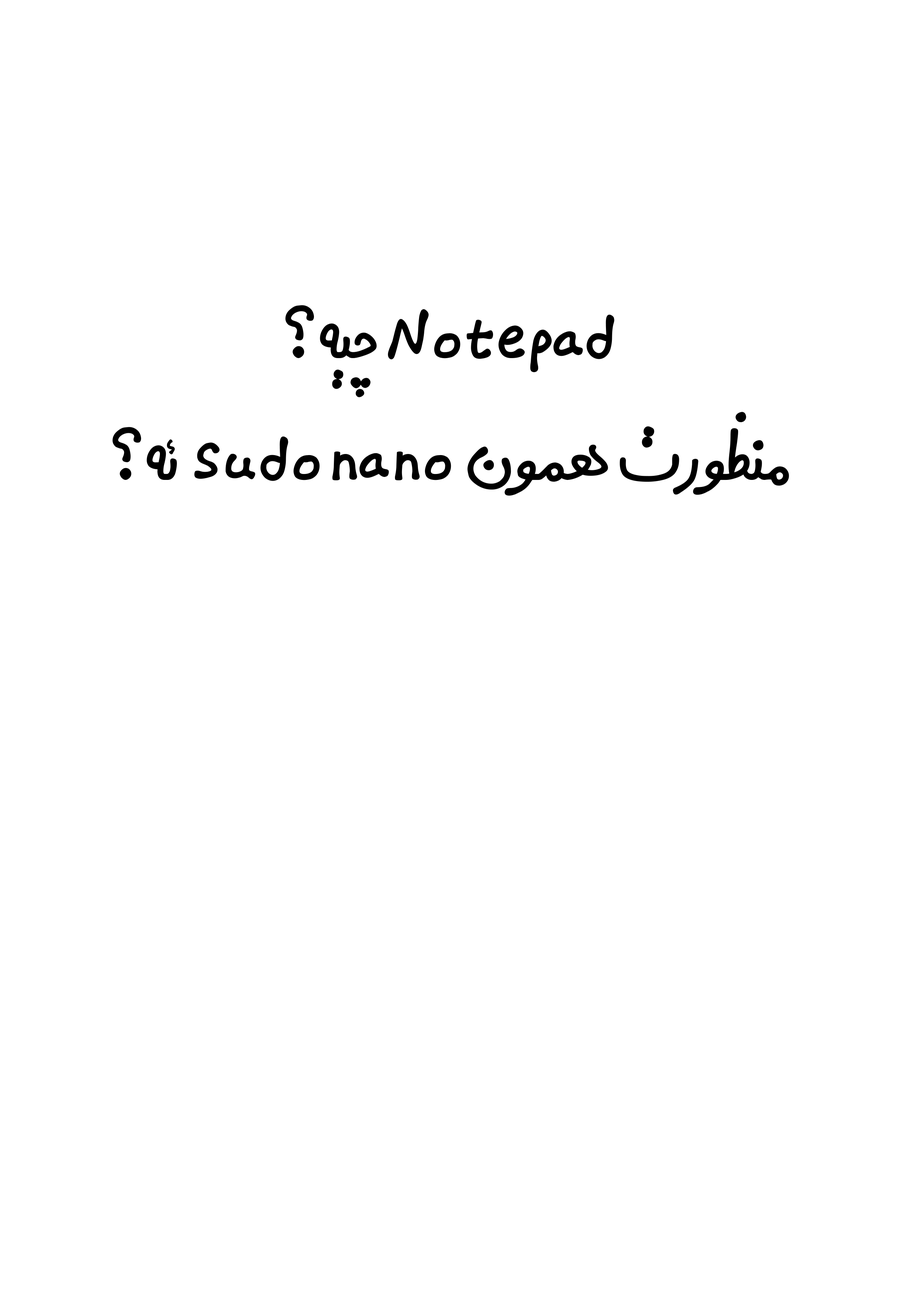
<style>
.page{position:relative;width:918px;height:1299px;background:#ffffff}
.page>*{position:absolute;margin:0}
.t1{font:96.4px/121.9px "Digi-Gran-Payeh-Bold";color:#000000}
</style>
<div class="page">
<p class="t1" style="left:113px;top:305px;width:676px;height:191px;text-align:center">Notepad چیه؟<br>منظورت همون  sudo nano  ئه؟</p>
</div>
